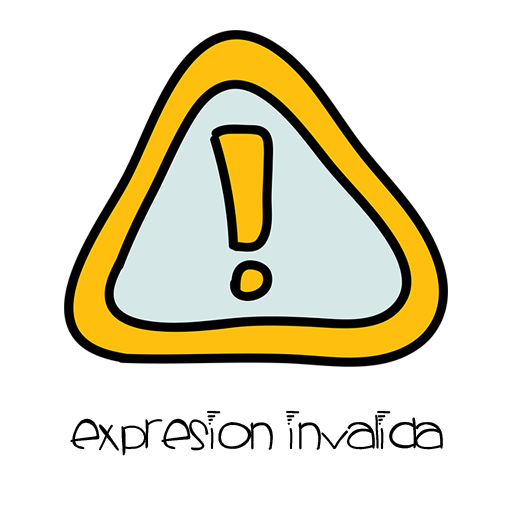
<style>
.page{position:relative;width:512px;height:512px;background:#ffffff}
.page>*{position:absolute;margin:0}
.t1{font:48px "Sprinklescolors";color:#000000}
</style>
<div class="page">
<p class="t1" style="left:70px;top:410px;width:373px;height:46px">Expresion invalida</p>
</div>
